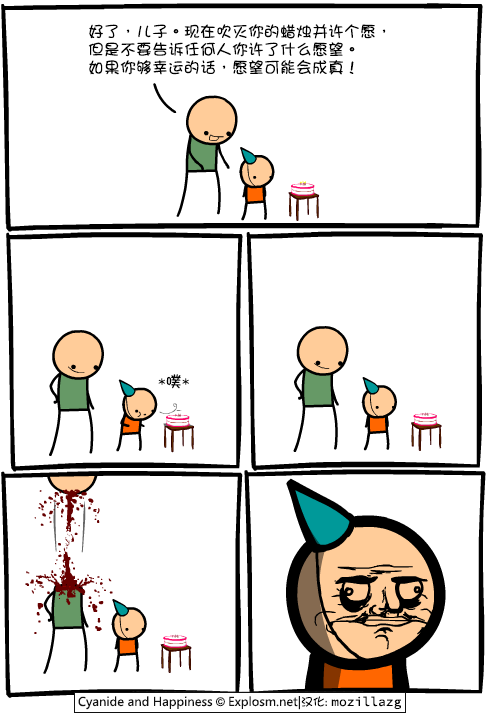
<style>
.page{position:relative;width:500px;height:720px;background:#ffffff}
.page>*{position:absolute;margin:0}
.t1{font:16px/18px "DFGirl";color:#000000}
.t2{font:16px "DFGirl";color:#000000}
</style>
<div class="page">
<p class="t1" style="left:88px;top:24px;width:298px;height:51px">好了，儿子。现在吹灭你的蜡烛并许个愿，<br>但是不要告诉任何人你许了什么愿望。<br>如果你够幸运的话，愿望可能会成真！</p>
<p class="t2" style="left:158px;top:374px;width:31px;height:15px">*噗*</p>
</div>
